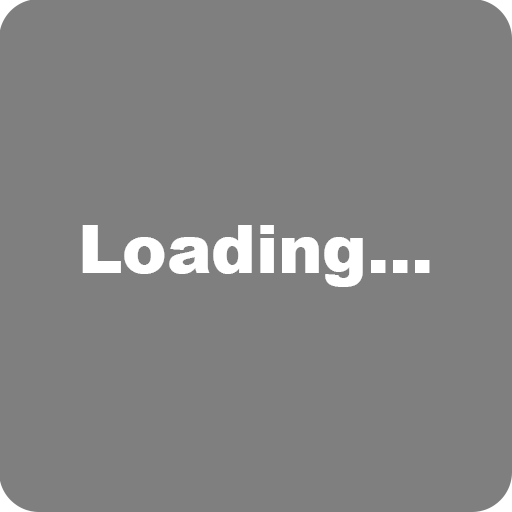
<style>
.page{position:relative;width:512px;height:512px;background:#7f7f7f}
.page>*{position:absolute;margin:0}
.t1{font:66.7px "Arial-Black";color:#ffffff}
</style>
<div class="page">
<p class="t1" style="left:82px;top:225px;width:348px;height:62px">Loading...</p>
</div>
